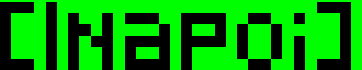
<style>
.page{position:relative;width:362px;height:70px;background:#00ff00}
.page>*{position:absolute;margin:0}
.t1{font:57px "Pixeled";color:#000000}
</style>
<div class="page">
<p class="t1" style="left:0px;top:2px;width:351px;height:68px">[Inapoi]</p>
</div>
